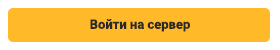
<style>
.page{position:relative;width:280px;height:50px;background:#ffb929}
.page>*{position:absolute;margin:0}
.t1{font:12.8px "Roboto-Bold";color:#2a2a2a}
</style>
<div class="page">
<p class="t1" style="left:90px;top:19px;width:100px;height:13px">Войти на сервер</p>
</div>
